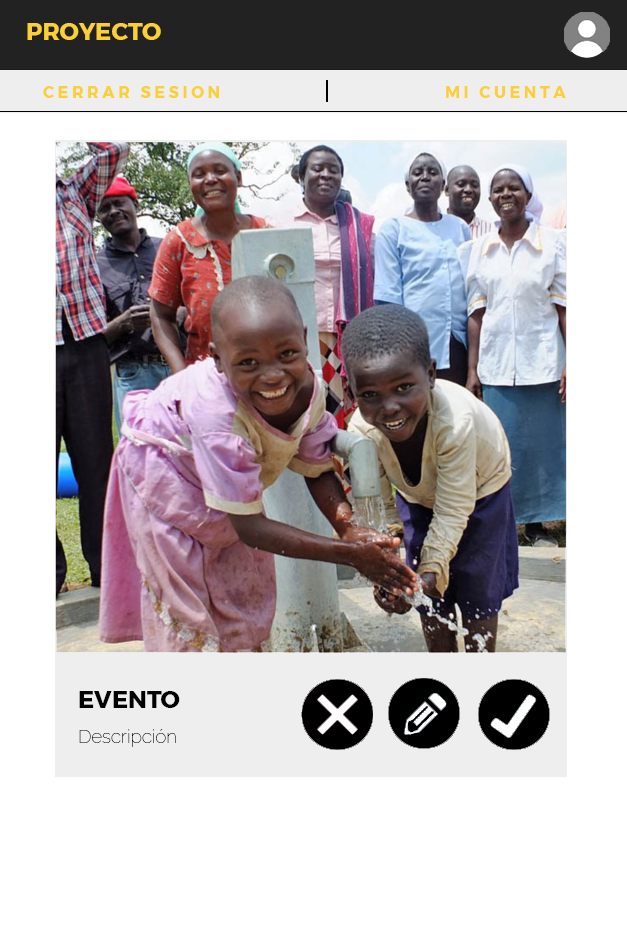
<style>
.page{position:relative;width:627px;height:925px;background:#ffffff}
.page>*{position:absolute;margin:0}
.t1{font:24px "Montserrat-Bold";color:#facf38}
.t2{font:16.1px "Montserrat-Bold";color:#facf38}
.t3{font:24px "Montserrat-Bold";color:#000000}
.t4{font:18.7px "Raleway-Thin";color:#000000}
</style>
<div class="page">
<p class="t1" style="left:27px;top:23px;width:134px;height:17px">PROYECTO</p>
<p class="t2" style="left:43px;top:86px;width:176px;height:12px">C E R R A R   S E S I O N</p>
<p class="t2" style="left:446px;top:86px;width:120px;height:12px">M I   C U E N T A</p>
<p class="t3" style="left:79px;top:691px;width:101px;height:17px">EVENTO</p>
<p class="t4" style="left:79px;top:729px;width:97px;height:18px">Descripción</p>
</div>
